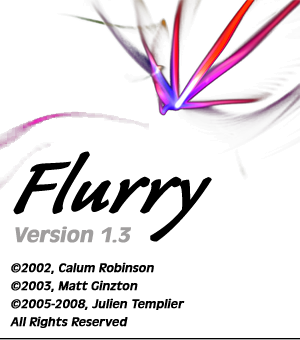
<style>
.page{position:relative;width:300px;height:340px;background:#ffffff}
.page>*{position:absolute;margin:0}
.t1{font:94px "CalibanStd";color:#000000;font-weight:bold;font-style:italic}
.t2{font:22px "AntiqueOliT-Medi";color:#a09e9e;font-weight:bold;font-style:italic}
.t3{font:13px/18px "AntiqueOliT-Regu";color:#000000;font-weight:bold;font-style:italic}
</style>
<div class="page">
<p class="t1" style="left:13px;top:151px;width:199px;height:91px">Flurry</p>
<p class="t2" style="left:15px;top:226px;width:116px;height:17px">Version 1.3</p>
<p class="t3" style="left:10px;top:262px;width:175px;height:66px">©2002, Calum Robinson<br>©2003, Matt Ginzton<br>©2005-2008, Julien Templier<br>All Rights Reserved</p>
</div>
